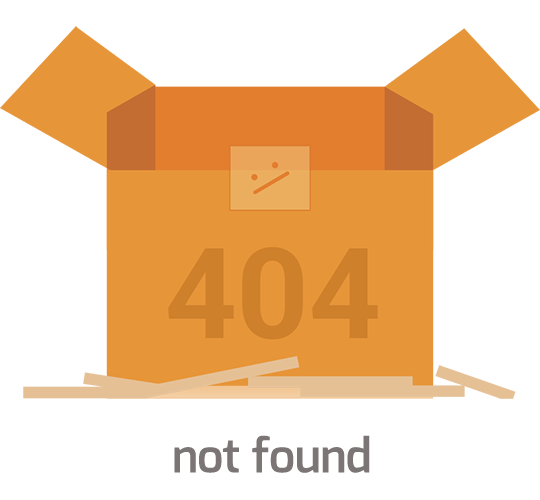
<style>
.page{position:relative;width:540px;height:500px;background:#ffffff}
.page>*{position:absolute;margin:0}
.t1{font:46.5px "Exo-DemiBold";color:#7b7575}
</style>
<div class="page">
<p class="t1" style="left:174px;top:435px;width:196px;height:38px">not found</p>
</div>
